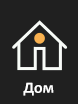
<style>
.page{position:relative;width:78px;height:104px;background:#202020}
.page>*{position:absolute;margin:0}
.t1{font:16px "Calibri-Bold";color:#ffffff}
</style>
<div class="page">
<p class="t1" style="left:23px;top:82px;width:31px;height:14px">Дом</p>
</div>
